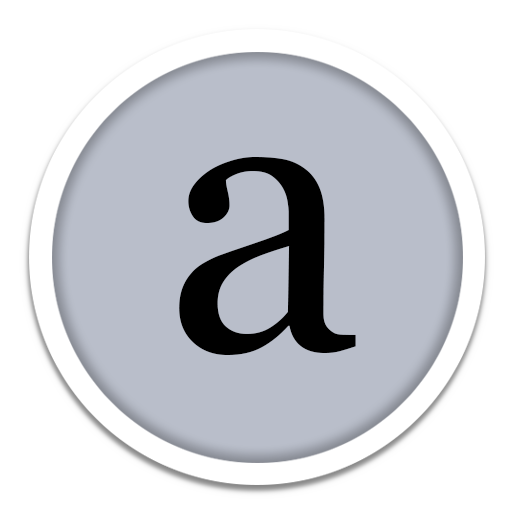
<style>
.page{position:relative;width:512px;height:512px;background:#ffffff}
.page>*{position:absolute;margin:0}
.t1{font:390px "Georgia";color:#000000}
</style>
<div class="page">
<p class="t1" style="left:179px;top:157px;width:177px;height:198px">a</p>
</div>
